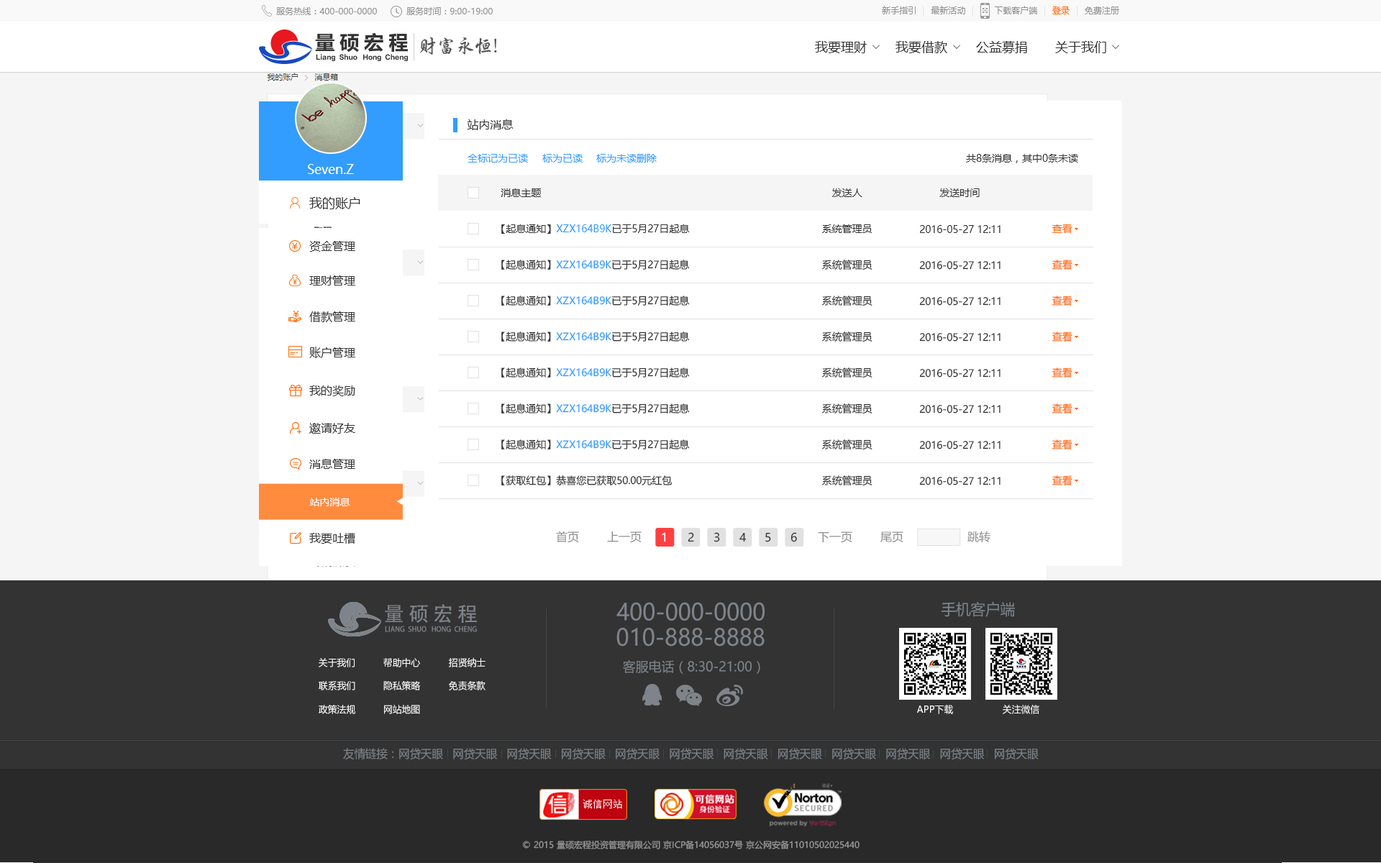
<style>
.page{position:relative;width:1381px;height:863px;background:#ffffff}
.page>*{position:absolute;margin:0}
.t1{font:8.6px "MicrosoftYaHei";color:#909090}
.t2{font:8.6px "MicrosoftYaHei";color:#ff6803}
.t3{font:20.5px "FZLTCHJW--GB1-0";letter-spacing:0.2em;color:#333333}
.t4{font:19.1px "Tensentype-BoDangXingKaiJ";color:#555555;scale:0.96 1}
.t5{font:12.9px "MicrosoftYaHei";color:#333333}
.t6{font:6.5px "FZLTDHK--GBK1-0";color:#333333;scale:0.96 1}
.t7{font:11.5px "MicrosoftYaHei";color:#333333}
.t8{font:10.1px "MicrosoftYaHei";color:#329dff}
.t9{font:10.1px "MicrosoftYaHei";color:#333333}
.t10{font:12.9px "MicrosoftYaHei";color:#ffffff}
.t11{font:10.1px "MicrosoftYaHei";color:#ff6803}
.t12{font:10.1px "MicrosoftYaHei";color:#ffffff}
.t13{font:11.5px "MicrosoftYaHei";color:#909090}
.t14{font:11.5px "MicrosoftYaHei";color:#ffffff}
.t15{font:20.5px "AdobeHeitiStd-Regular";letter-spacing:0.2em;color:#7f848a}
.t16{font:23px "MicrosoftYaHei";color:#7f848a;scale:0.96 1}
.t17{font:15.3px "MicrosoftYaHei";color:#7f848a;scale:0.96 1}
.t18{font:7.3px "AdobeHeitiStd-Regular";color:#7f848a;text-transform:uppercase;scale:0.96 1}
.t19{font:9.6px "MicrosoftYaHei";color:#ffffff;scale:0.96 1}
.t20{font:13.4px "MicrosoftYaHei";color:#7f848a;scale:0.96 1}
.t21{font:11.5px "MicrosoftYaHei";color:#7f848a;scale:0.96 1}
.t22{font:8.6px "MicrosoftYaHei";color:#999999}
</style>
<div class="page">
<p class="t1" style="left:882px;top:6px;width:34px;height:8px">新手指引</p>
<p class="t1" style="left:931px;top:6px;width:34px;height:8px">最新活动</p>
<p class="t1" style="left:994px;top:6px;width:44px;height:8px">下载客户端</p>
<p class="t1" style="left:276px;top:7px;width:101px;height:8px">服务热线：400-000-0000</p>
<p class="t1" style="left:406px;top:7px;width:87px;height:8px">服务时间：9:00-19:00</p>
<p class="t2" style="left:1052px;top:6px;width:18px;height:8px">登录</p>
<p class="t1" style="left:1085px;top:6px;width:34px;height:8px">免费注册</p>
<p class="t3" style="left:315px;top:32px;width:93px;height:21px">量硕宏程</p>
<p class="t4" style="left:419px;top:37px;width:78px;height:18px">财富永恒!</p>
<p class="t5" style="left:815px;top:41px;width:52px;height:12px">我要理财</p>
<p class="t5" style="left:896px;top:41px;width:51px;height:12px">我要借款</p>
<p class="t5" style="left:976px;top:41px;width:51px;height:12px">公益募捐</p>
<p class="t5" style="left:1055px;top:41px;width:51px;height:12px">关于我们</p>
<p class="t6" style="left:316px;top:54px;width:92px;height:7px">Liang  Shuo   Hong  Cheng</p>
<p class="t7" style="left:467px;top:119px;width:47px;height:11px">站内消息</p>
<p class="t8" style="left:468px;top:154px;width:60px;height:9px">全标记为已读</p>
<p class="t8" style="left:542px;top:154px;width:41px;height:9px">标为已读</p>
<p class="t8" style="left:596px;top:154px;width:41px;height:9px">标为未读</p>
<p class="t8" style="left:637px;top:154px;width:20px;height:9px">删除</p>
<p class="t9" style="left:966px;top:154px;width:112px;height:9px">共8条消息，其中0条未读</p>
<p class="t10" style="left:308px;top:164px;width:46px;height:10px">Seven.Z</p>
<p class="t5" style="left:309px;top:197px;width:51px;height:12px">我的账户</p>
<p class="t9" style="left:501px;top:188px;width:40px;height:9px">消息主题</p>
<p class="t9" style="left:832px;top:188px;width:31px;height:9px">发送人</p>
<p class="t9" style="left:940px;top:188px;width:40px;height:9px">发送时间</p>
<p class="t8" style="left:501px;top:224px;width:189px;height:10px"><span class="t9">【起息通知】</span>XZX164B9K<span class="t9">已于5月27日起息</span></p>
<p class="t9" style="left:822px;top:224px;width:51px;height:9px">系统管理员</p>
<p class="t9" style="left:920px;top:225px;width:81px;height:8px">2016-05-27 12:11</p>
<p class="t11" style="left:1052px;top:224px;width:21px;height:9px">查看</p>
<p class="t7" style="left:309px;top:241px;width:46px;height:11px">资金管理</p>
<p class="t8" style="left:501px;top:260px;width:189px;height:10px"><span class="t9">【起息通知】</span>XZX164B9K<span class="t9">已于5月27日起息</span></p>
<p class="t9" style="left:822px;top:260px;width:51px;height:10px">系统管理员</p>
<p class="t9" style="left:919px;top:261px;width:82px;height:9px">2016-05-27 12:11</p>
<p class="t11" style="left:1052px;top:260px;width:21px;height:10px">查看</p>
<p class="t7" style="left:309px;top:276px;width:46px;height:10px">理财管理</p>
<p class="t8" style="left:501px;top:296px;width:189px;height:10px"><span class="t9">【起息通知】</span>XZX164B9K<span class="t9">已于5月27日起息</span></p>
<p class="t9" style="left:822px;top:296px;width:51px;height:10px">系统管理员</p>
<p class="t9" style="left:919px;top:297px;width:82px;height:9px">2016-05-27 12:11</p>
<p class="t11" style="left:1052px;top:296px;width:21px;height:10px">查看</p>
<p class="t7" style="left:309px;top:312px;width:46px;height:10px">借款管理</p>
<p class="t8" style="left:501px;top:332px;width:189px;height:10px"><span class="t9">【起息通知】</span>XZX164B9K<span class="t9">已于5月27日起息</span></p>
<p class="t9" style="left:822px;top:332px;width:51px;height:10px">系统管理员</p>
<p class="t9" style="left:919px;top:333px;width:82px;height:9px">2016-05-27 12:11</p>
<p class="t11" style="left:1052px;top:332px;width:21px;height:10px">查看</p>
<p class="t7" style="left:309px;top:347px;width:46px;height:11px">账户管理</p>
<p class="t8" style="left:501px;top:368px;width:189px;height:10px"><span class="t9">【起息通知】</span>XZX164B9K<span class="t9">已于5月27日起息</span></p>
<p class="t9" style="left:822px;top:368px;width:51px;height:10px">系统管理员</p>
<p class="t9" style="left:919px;top:369px;width:82px;height:9px">2016-05-27 12:11</p>
<p class="t11" style="left:1052px;top:368px;width:21px;height:10px">查看</p>
<p class="t7" style="left:309px;top:386px;width:46px;height:10px">我的奖励</p>
<p class="t8" style="left:501px;top:404px;width:189px;height:10px"><span class="t9">【起息通知】</span>XZX164B9K<span class="t9">已于5月27日起息</span></p>
<p class="t9" style="left:822px;top:404px;width:51px;height:10px">系统管理员</p>
<p class="t9" style="left:919px;top:405px;width:82px;height:9px">2016-05-27 12:11</p>
<p class="t11" style="left:1052px;top:404px;width:21px;height:10px">查看</p>
<p class="t7" style="left:309px;top:423px;width:46px;height:11px">邀请好友</p>
<p class="t8" style="left:501px;top:440px;width:189px;height:10px"><span class="t9">【起息通知】</span>XZX164B9K<span class="t9">已于5月27日起息</span></p>
<p class="t9" style="left:822px;top:440px;width:51px;height:10px">系统管理员</p>
<p class="t9" style="left:919px;top:441px;width:82px;height:9px">2016-05-27 12:11</p>
<p class="t11" style="left:1052px;top:440px;width:21px;height:10px">查看</p>
<p class="t7" style="left:309px;top:459px;width:46px;height:10px">消息管理</p>
<p class="t9" style="left:501px;top:476px;width:172px;height:10px">【获取红包】恭喜您已获取50.00元红包</p>
<p class="t9" style="left:822px;top:476px;width:51px;height:10px">系统管理员</p>
<p class="t9" style="left:919px;top:477px;width:82px;height:9px">2016-05-27 12:11</p>
<p class="t11" style="left:1052px;top:476px;width:21px;height:10px">查看</p>
<p class="t12" style="left:309px;top:498px;width:41px;height:8px">站内消息</p>
<p class="t7" style="left:309px;top:533px;width:46px;height:11px">我要吐槽</p>
<p class="t13" style="left:556px;top:531px;width:23px;height:12px">首页</p>
<p class="t13" style="left:607px;top:531px;width:35px;height:12px">上一页</p>
<p class="t14" style="left:662px;top:532px;width:4px;height:10px">1</p>
<p class="t7" style="left:688px;top:532px;width:6px;height:10px">2</p>
<p class="t7" style="left:714px;top:532px;width:6px;height:10px">3</p>
<p class="t7" style="left:740px;top:532px;width:7px;height:10px">4</p>
<p class="t7" style="left:765px;top:532px;width:6px;height:10px">5</p>
<p class="t7" style="left:791px;top:532px;width:6px;height:10px">6</p>
<p class="t13" style="left:818px;top:532px;width:34px;height:11px">下一页</p>
<p class="t13" style="left:881px;top:532px;width:23px;height:11px">尾页</p>
<p class="t13" style="left:968px;top:531px;width:23px;height:12px">跳转</p>
<p class="t15" style="left:385px;top:604px;width:92px;height:19px">量硕宏程</p>
<p class="t16" style="left:617px;top:602px;width:148px;height:19px">400-000-0000</p>
<p class="t17" style="left:942px;top:601px;width:73px;height:16px">手机客户端</p>
<p class="t18" style="left:385px;top:626px;width:92px;height:6px">Liang  Shuo   Hong  Cheng</p>
<p class="t16" style="left:617px;top:628px;width:148px;height:19px">010-888-8888</p>
<p class="t19" style="left:319px;top:658px;width:36px;height:10px">关于我们</p>
<p class="t19" style="left:383px;top:658px;width:37px;height:10px">帮助中心</p>
<p class="t19" style="left:449px;top:658px;width:37px;height:10px">招贤纳士</p>
<p class="t20" style="left:623px;top:660px;width:137px;height:14px">客服电话（8:30-21:00）</p>
<p class="t19" style="left:319px;top:681px;width:36px;height:10px">联系我们</p>
<p class="t19" style="left:383px;top:681px;width:38px;height:10px">隐私策略</p>
<p class="t19" style="left:449px;top:681px;width:37px;height:10px">免责条款</p>
<p class="t19" style="left:319px;top:705px;width:36px;height:9px">政策法规</p>
<p class="t19" style="left:384px;top:705px;width:36px;height:9px">网站地图</p>
<p class="t19" style="left:917px;top:705px;width:36px;height:9px">APP下载</p>
<p class="t19" style="left:1003px;top:705px;width:37px;height:9px">关注微信</p>
<p class="t21" style="left:343px;top:748px;width:696px;height:12px">友情链接：网贷天眼   网贷天眼   网贷天眼   网贷天眼   网贷天眼   网贷天眼   网贷天眼   网贷天眼   网贷天眼   网贷天眼   网贷天眼   网贷天眼</p>
<p class="t22" style="left:522px;top:840px;width:338px;height:10px">© 2015 量硕宏程投资管理有限公司 京ICP备14056037号 京公网安备11010502025440</p>
</div>
